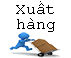
<style>
.page{position:relative;width:71px;height:58px;background:#ffffff}
.page>*{position:absolute;margin:0}
.t1{font:15.8px/14.8px "CourierNewPSMT";letter-spacing:-0.005em;color:#000000}
</style>
<div class="page">
<p class="t1" style="left:16px;top:1px;width:39px;height:31px;text-align:center">Xuất<br>hàng</p>
</div>
